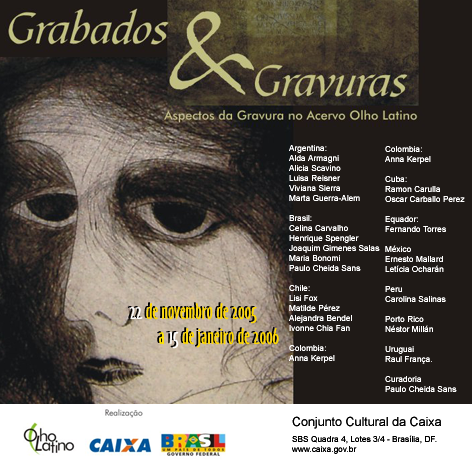
<style>
.page{position:relative;width:472px;height:472px;background:#1f1a17}
.page>*{position:absolute;margin:0}
.t1{font:8.3px "ArialMT";color:#ffffff}
.t2{font:20.8px "OzHandicraftBT-Roman"}
.t3{font:20.8px "OzHandicraftBT-Roman";color:#ffd900}
.t4{font:20.8px "OzHandicraftBT-Roman";color:#ffffff}
.t5{font:20.8px "OzHandicraftBT-Roman";color:#ffe400}
.t6{font:12.5px "ArialMT";color:#000000}
.t7{font:8.3px "ArialMT";color:#000000}
</style>
<div class="page">
<p class="t1" style="left:289px;top:145px;width:91px;height:218px">Argentina:<br>Alda Armagni<br>Alicia Scavino<br>Luisa Reisner<br>Viviana Sierra<br>Marta Guerra-Alem<br><br>Brasil:<br>Celina Carvalho<br>Henrique Spengler<br>Joaquim Gimenes Salas<br>Maria Bonomi<br>Paulo Cheida Sans<br><br>Chile:<br>Lisi Fox<br>Matilde Pérez<br>Alejandra Bendel<br>Ivonne Chia Fan<br><br>Colombia:<br>Anna Kerpel</p>
<p class="t1" style="left:385px;top:146px;width:80px;height:246px">Colombia:<br>Anna Kerpel<br><br>Cuba:<br>Ramon Carulla<br>Oscar Carballo Perez<br><br>Equador:<br>Fernando Torres<br><br>México<br>Ernesto Mallard<br>Letícia Ocharán<br><br>Peru<br>Carolina Salinas<br><br>Porto Rico<br>Néstor Millán<br><br>Uruguai<br>Raul França. <br><br>Curadoria<br>Paulo Cheida Sans</p>
<p class="t2" style="left:127px;top:302px;width:150px;height:46px">22 de novembro de 2005 <br>        a 15 de janeiro de 2006</p>
<p class="t3" style="left:129px;top:303px;width:150px;height:46px"><span class="t4">22 </span>de novembro de 2005 <br>       <span class="t5"> a </span><span class="t4">15 </span>de janeiro de 2006</p>
<p class="t6" style="left:292px;top:416px;width:149px;height:13px">Conjunto Cultural da Caixa</p>
<p class="t7" style="left:292px;top:435px;width:145px;height:19px">SBS Quadra 4, Lotes 3/4 - Brasília, DF.<br>www.caixa.gov.br</p>
</div>
